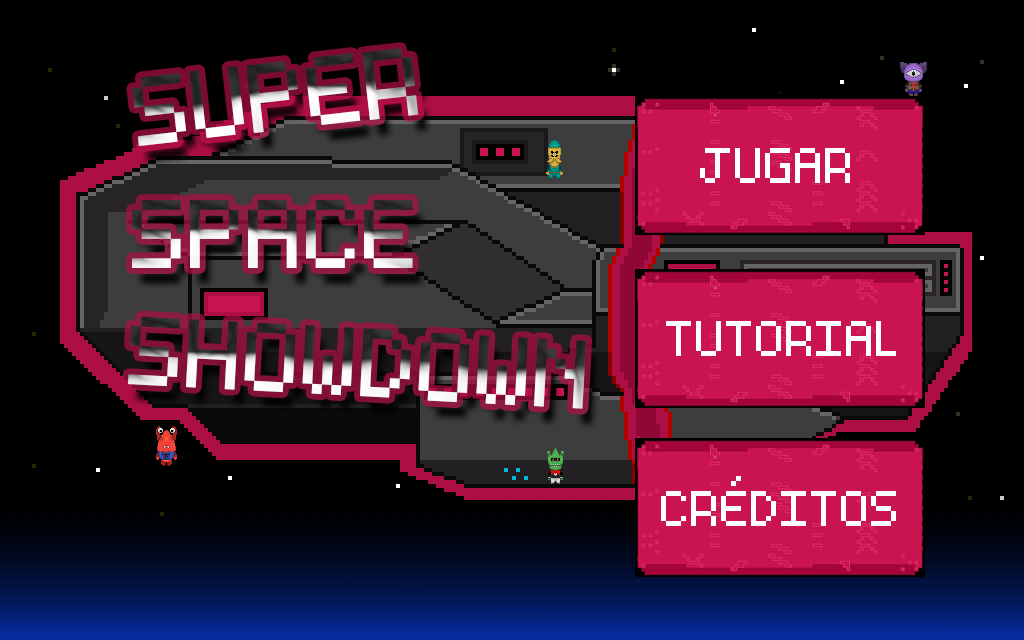
<style>
.page{position:relative;width:1024px;height:640px;background:#000000}
.page>*{position:absolute;margin:0}
.t1{font:155.1px "Essential"}
.t2{font:80px "Essential";color:#fefefe}
</style>
<div class="page">
<p class="t1" style="left:132px;top:48px;width:287px;height:98px;rotate:-6deg">SUPER</p>
<p class="t2" style="left:700px;top:148px;width:150px;height:35px">JUGAR</p>
<p class="t1" style="left:132px;top:200px;width:281px;height:68px">SPACE</p>
<p class="t1" style="left:128px;top:316px;width:459px;height:93px;rotate:3deg">SHOWDOWN</p>
<p class="t2" style="left:666px;top:321px;width:230px;height:35px">TUTORIAL</p>
<p class="t2" style="left:661px;top:476px;width:235px;height:50px">CRÉDITOS</p>
</div>
